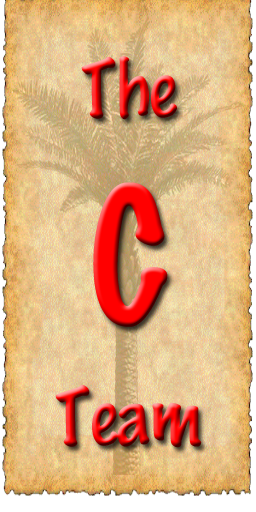
<style>
.page{position:relative;width:256px;height:512px}
.page>*{position:absolute;margin:0}
.t1{font:72px "MarkerFelt-Thin"}
.t2{font:172px "MarkerFelt-Thin"}
</style>
<div class="page">
<p class="t1" style="left:55px;top:56px;width:147px;height:392px;text-align:center">The<br><span class="t2">C<br><br></span>Team</p>
</div>
